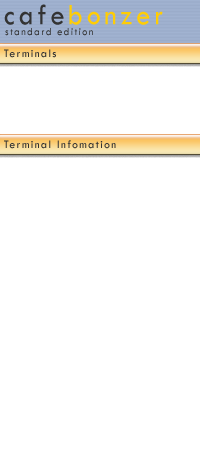
<style>
.page{position:relative;width:200px;height:464px;background:#ffffff}
.page>*{position:absolute;margin:0}
.t1{font:30.3px "TwCenMT-Regular";letter-spacing:0.2em;color:#ffcd05;scale:0.9 1}
.t2{font:30.3px "TwCenMT-Regular";letter-spacing:0.2em;color:#333333;scale:0.9 1}
.t3{font:11.1px "TwCenMT-Regular";letter-spacing:0.2em;color:#333333;scale:0.9 1}
.t4{font:12px "TwCenMT-Regular";letter-spacing:0.2em;color:#333333;scale:0.9 1}
</style>
<div class="page">
<p class="t1" style="left:4px;top:4px;width:159px;height:21px"><span class="t2">cafe</span>bonzer</p>
<p class="t3" style="left:5px;top:28px;width:88px;height:8px">standard edition</p>
<p class="t4" style="left:4px;top:49px;width:52px;height:9px">Terminals</p>
<p class="t4" style="left:4px;top:140px;width:112px;height:9px">Terminal Infomation</p>
</div>
